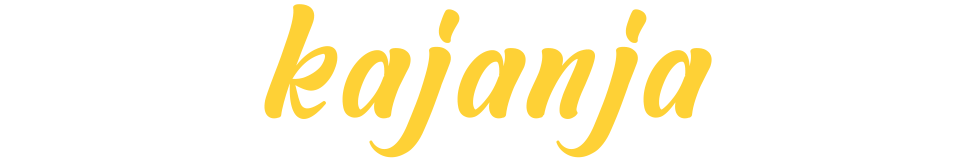
<style>
.page{position:relative;width:957px;height:167px;background:#ffffff}
.page>*{position:absolute;margin:0}
.t1{font:150px "AbeganshiRegular";letter-spacing:0.06em;color:#fed136}
</style>
<div class="page">
<p class="t1" style="left:264px;top:4px;width:448px;height:154px">kajanja</p>
</div>
